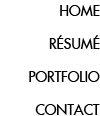
<style>
.page{position:relative;width:100px;height:116px;background:#ffffff}
.page>*{position:absolute;margin:0}
.t1{font:14px "FuturaLT";color:#000000;text-transform:uppercase}
</style>
<div class="page">
<p class="t1" style="left:60px;top:5px;width:40px;height:11px">Home</p>
<p class="t1" style="left:49px;top:35px;width:51px;height:14px">Résumé</p>
<p class="t1" style="left:29px;top:71px;width:71px;height:11px">Portfolio</p>
<p class="t1" style="left:35px;top:104px;width:65px;height:11px">Contact</p>
</div>
